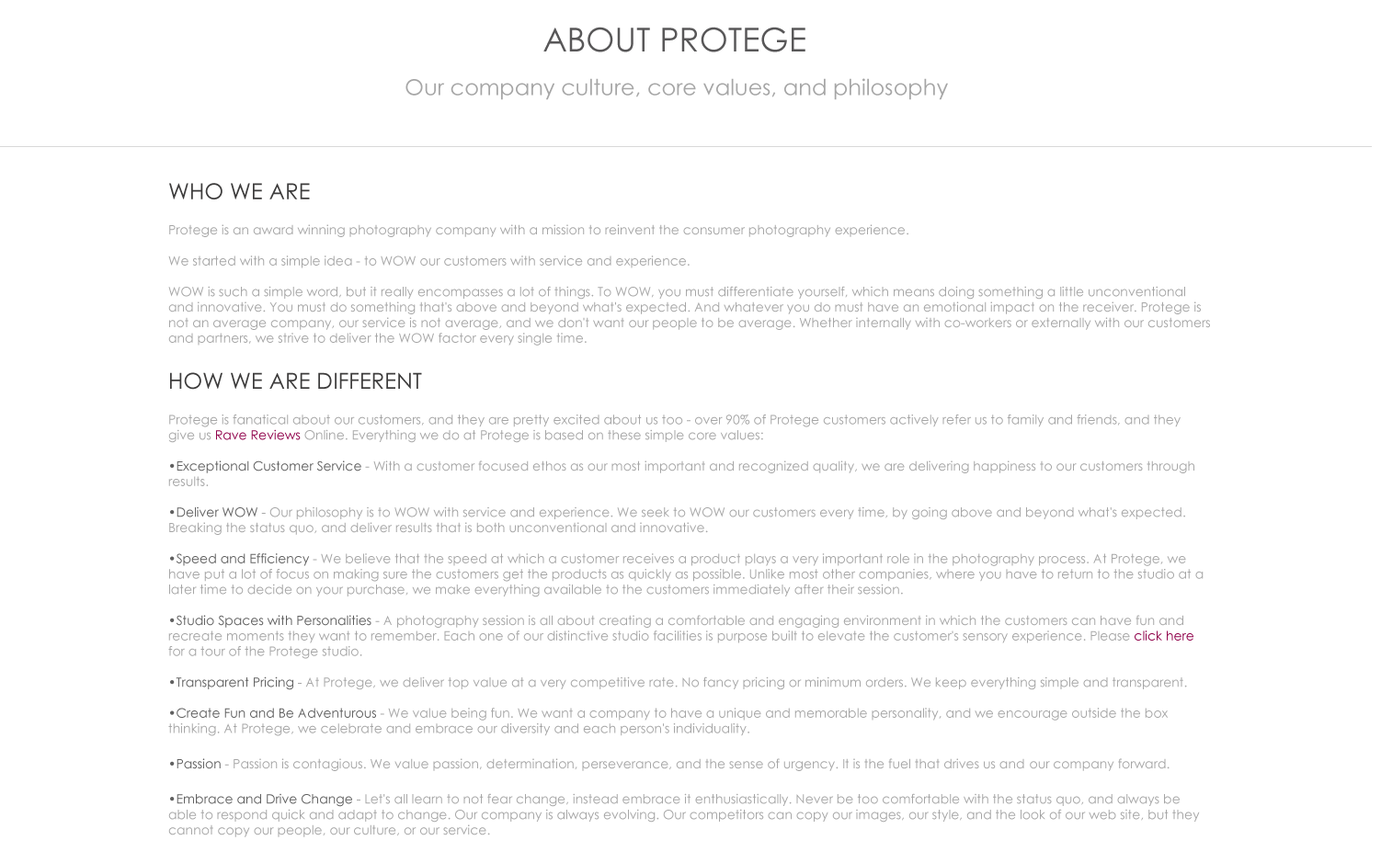
<style>
.page{position:relative;width:1381px;height:863px;background:#ffffff}
.page>*{position:absolute;margin:0}
.t1{font:33.1px "CenturyGothic";color:#585758}
.t2{font:22.1px "CenturyGothic";color:#a6a6a6}
.t3{font:12.9px "CenturyGothic";color:#a6a6a6}
.t4{font:22.1px "CenturyGothic";color:#3d3c3c}
.t5{font:12.9px "CenturyGothic";color:#90024b}
.t6{font:12.9px "CenturyGothic";color:#606060}
.t7{font:16.6px "CenturyGothic";color:#a6a6a6}
</style>
<div class="page">
<p class="t1" style="left:543px;top:27px;width:262px;height:25px">ABOUT PROTEGE</p>
<p class="t2" style="left:405px;top:78px;width:543px;height:22px">Our company culture, core values, and philosophy</p>
<p class="t3" style="left:168px;top:183px;width:1042px;height:655px"><span class="t4">WHO WE ARE<br><br></span>Protege is an award winning photography company with a mission to reinvent the consumer photography experience.<br><br>We started with a simple idea - to WOW our customers with service and experience.<br><br>WOW is such a simple word, but it really encompasses a lot of things. To WOW, you must differentiate yourself, which means doing something a little unconventional and innovative. You must do something that's above and beyond what's expected. And whatever you do must have an emotional impact on the receiver. Protege is not an average company, our service is not average, and we don't want our people to be average. Whether internally with co-workers or externally with our customers and partners, we strive to deliver the WOW factor every single time.<br><br><span class="t4">HOW WE ARE DIFFERENT<br><br></span>Protege is fanatical about our customers, and they are pretty excited about us too - over 90% of Protege customers actively refer us to family and friends, and they give us <span class="t5">Rave Reviews</span> Online. Everything we do at Protege is based on these simple core values:<br><br><span class="t6">•Exceptional Customer Service</span> - With a customer focused ethos as our most important and recognized quality, we are delivering happiness to our customers through results.<br><br><span class="t6">•Deliver WOW</span> - Our philosophy is to WOW with service and experience. We seek to WOW our customers every time, by going above and beyond what's expected. Breaking the status quo, and deliver results that is both unconventional and innovative.<br><br><span class="t6">•Speed and Efficiency</span> - We believe that the speed at which a customer receives a product plays a very important role in the photography process. At Protege, we have put a lot of focus on making sure the customers get the products as quickly as possible. Unlike most other companies, where you have to return to the studio at a later time to decide on your purchase, we make everything available to the customers immediately after their session.<br><br><span class="t6">•Studio Spaces with Personalities</span> - A photography session is all about creating a comfortable and engaging environment in which the customers can have fun and recreate moments they want to remember. Each one of our distinctive studio facilities is purpose built to elevate the customer's sensory experience. Please <span class="t5">click here</span> for a tour of the Protege studio.<br><br><span class="t6">•Transparent Pricing</span> - At Protege, we deliver top value at a very competitive rate. No fancy pricing or minimum orders. We keep everything simple and transparent.<br> <br><span class="t6">•Create Fun and Be Adventurous</span> - We value being fun. We want a company to have a unique and memorable personality, and we encourage outside the box <br>thinking. At Protege, we celebrate and embrace our diversity and each person's individuality.<br><br><span class="t6">•Passion</span> - Passion is contagious. We value passion, determination, perseverance, and the sense of urgency. It is the fuel that drives us and our company forward.<br><br><span class="t6">•Embrace and Drive Change</span> - Let's all learn to not fear change, instead embrace it enthusiastically. Never be too comfortable with the status quo, and always be able to respond quick and adapt to change. Our company is always evolving. Our competitors can copy our images, our style, and the look of our web site, but they cannot copy our people, our culture, or our service.<br><span class="t7"><br><br>THE TEAM</span></p>
</div>
